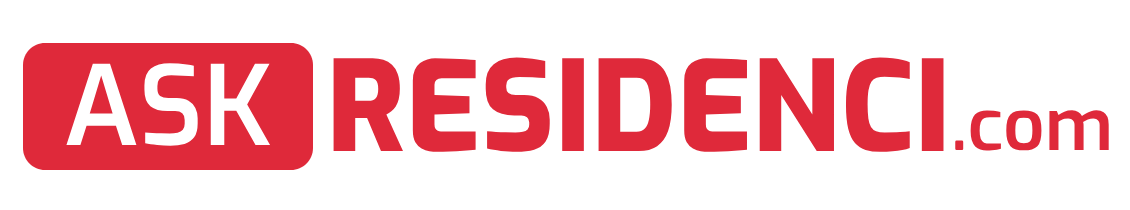
<style>
.page{position:relative;width:1130px;height:210px;background:#ffffff}
.page>*{position:absolute;margin:0}
.t1{font:110px "Exo-SemiBold";color:#ffffff}
.t2{font:125px "Exo-ExtraBold";color:#df293a}
.t3{font:72.8px "Exo-SemiBold";color:#df293a}
</style>
<div class="page">
<p class="t1" style="left:66px;top:63px;width:205px;height:83px">ASK</p>
<p class="t2" style="left:333px;top:57px;width:611px;height:95px">RESIDENCI</p>
<p class="t3" style="left:955px;top:110px;width:154px;height:41px">.com</p>
</div>
